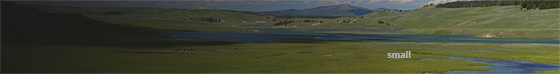
<style>
.page{position:relative;width:560px;height:74px}
.page>*{position:absolute;margin:0}
.t1{font:10px "Lato-Bold";color:#b6b8b6}
</style>
<div class="page">
<p class="t1" style="left:387px;top:51px;width:24px;height:7px">small</p>
</div>
